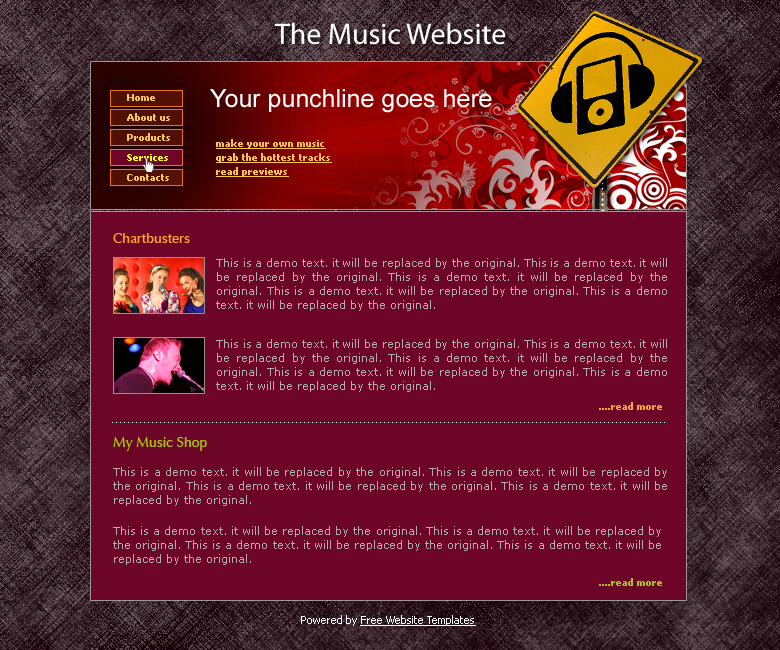
<style>
.page{position:relative;width:780px;height:650px;background:#6c0528}
.page>*{position:absolute;margin:0}
.t1{font:30px "MyriadPro-Regular";color:#ffffff}
.t2{font:25px "ArialMT";color:#ffffff}
.t3{font:10px/20px "Tahoma-Bold";color:#fbc551}
.t4{font:10px/20px "Tahoma-Bold";color:#fbfe00}
.t5{font:10px/14px "Tahoma-Bold";color:#fbc551;text-decoration:underline}
.t6{font:14px "ZapfHumanist601BT-Demi";color:#ffa329}
.t7{font:11px/14px "Verdana";color:#b1b0ae}
.t8{font:10px "Tahoma-Bold";color:#ffa329}
.t9{font:14px "ZapfHumanist601BT-Demi";color:#a9c60f}
.t10{font:10px "Tahoma-Bold";color:#a9c60f}
.t11{font:11px "Tahoma";color:#ffffff;text-decoration:underline}
.t12{font:11px "Tahoma";color:#ffffff}
</style>
<div class="page">
<p class="t1" style="left:275px;top:22px;width:231px;height:23px">The Music Website</p>
<p class="t2" style="left:210px;top:89px;width:282px;height:24px">Your punchline goes here</p>
<p class="t3" style="left:127px;top:94px;width:43px;height:87px;text-align:justify">Home<br>About us<br>Products<br><span class="t4">Services<br></span>Contacts</p>
<p class="t5" style="left:216px;top:139px;width:116px;height:38px;text-align:justify">make your own music<br>grab the hottest tracks<br>read previews</p>
<p class="t6" style="left:113px;top:233px;width:77px;height:10px">Chartbusters</p>
<p class="t7" style="left:216px;top:258px;width:451px;height:53px;text-align:justify">This is a demo text. it will be replaced by the original. This is a demo text. it will be replaced by the original. This is a demo text. it will be replaced by the original. This is a demo text. it will be replaced by the original. This is a demo text. it will be replaced by the original.</p>
<p class="t7" style="left:216px;top:339px;width:451px;height:53px;text-align:justify">This is a demo text. it will be replaced by the original. This is a demo text. it will be replaced by the original. This is a demo text. it will be replaced by the original. This is a demo text. it will be replaced by the original. This is a demo text. it will be replaced by the original.</p>
<p class="t8" style="left:599px;top:402px;width:63px;height:8px">....read more</p>
<p class="t9" style="left:113px;top:437px;width:94px;height:14px">My Music Shop</p>
<p class="t7" style="left:113px;top:467px;width:554px;height:39px;text-align:justify">This is a demo text. it will be replaced by the original. This is a demo text. it will be replaced by the original. This is a demo text. it will be replaced by the original. This is a demo text. it will be replaced by the original.<br>This is a demo text. it will be replaced by the original. This is a demo text. it will be replaced by the original. This is a demo text. it will be replaced by the original. This is a demo text. it will be replaced by the original.</p>
<p class="t7" style="left:113px;top:526px;width:548px;height:39px;text-align:justify">This is a demo text. it will be replaced by the original. This is a demo text. it will be replaced by the original. This is a demo text. it will be replaced by the original. This is a demo text. it will be replaced by the original.<br>This is a demo text. it will be replaced by the original. This is a demo text. it will be replaced by the original. This is a demo text. it will be replaced by the original. This is a demo text. it will be replaced by the original.</p>
<p class="t10" style="left:599px;top:578px;width:63px;height:8px">....read more</p>
<p class="t11" style="left:301px;top:615px;width:175px;height:11px"><span class="t12">Powered by </span>Free Website Templates</p>
</div>
